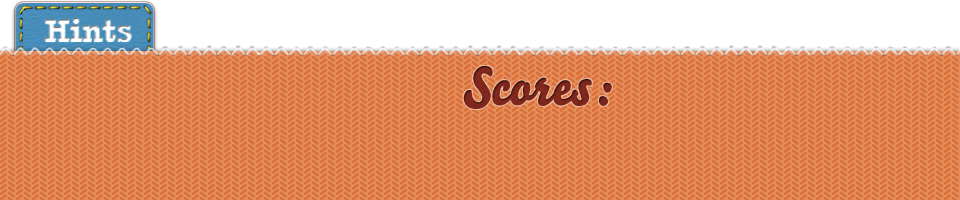
<style>
.page{position:relative;width:960px;height:200px;background:#dc7138}
.page>*{position:absolute;margin:0}
.t1{font:34px "AmerTypewriterITCbyBT-Bold";color:#ffffff;scale:0.84 1}
.t2{font:53.4px "Bello-Pro";color:#711313}
</style>
<div class="page">
<p class="t1" style="left:44px;top:18px;width:88px;height:24px">Hints</p>
<p class="t2" style="left:463px;top:66px;width:149px;height:43px">Scores:</p>
</div>
